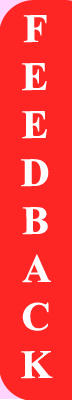
<style>
.page{position:relative;width:72px;height:400px;background:#fe2525}
.page>*{position:absolute;margin:0}
.t1{font:40px "TimesNewRomanPS-BoldMT";color:#fefcfc;font-weight:bold}
</style>
<div class="page">
<p class="t1" style="left:21px;top:15px;width:32px;height:364px;text-align:center">F<br>E<br>E<br>D<br>B<br>A<br>C<br>K</p>
</div>
